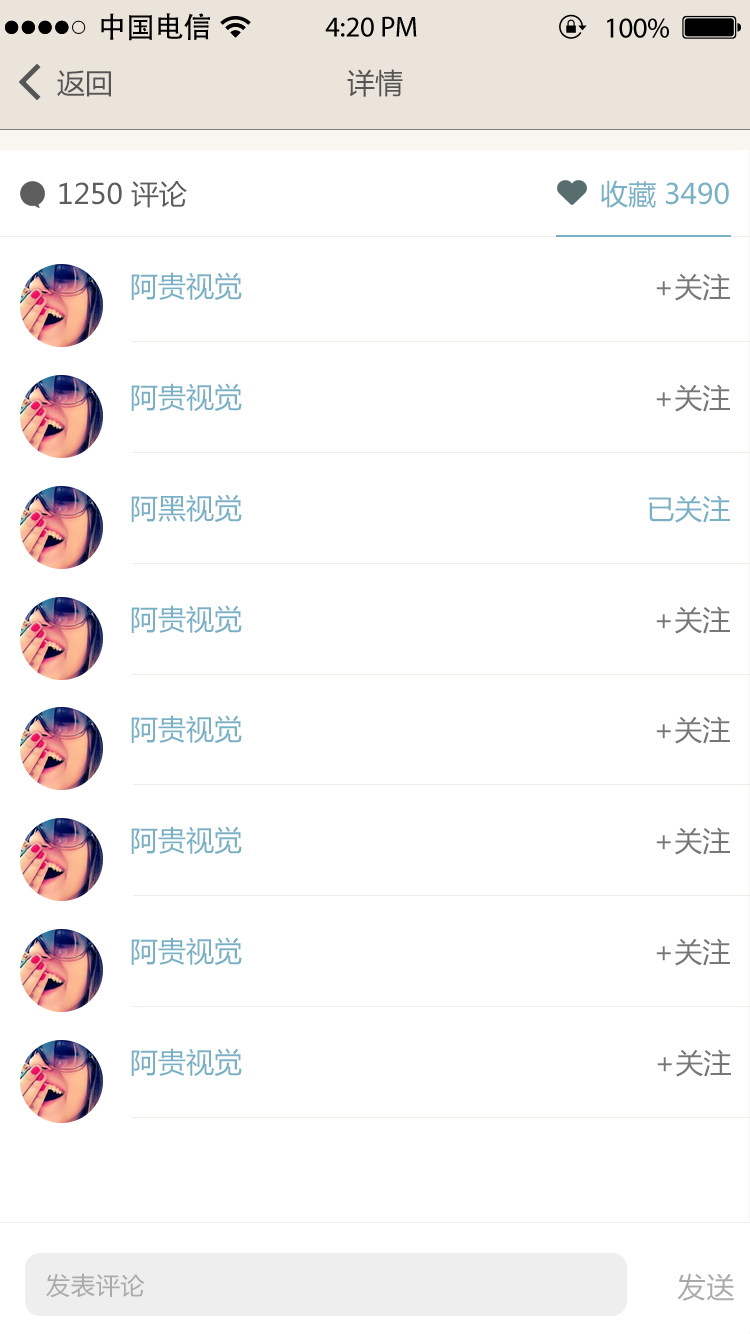
<style>
.page{position:relative;width:750px;height:1334px;background:#ffffff}
.page>*{position:absolute;margin:0}
.t1{font:28.8px "AdobeHeitiStd-Regular";color:#000000}
.t2{font:28.8px "MyriadPro-Regular";color:#000000}
.t3{font:28px "MicrosoftYaHei";color:#555555}
.t4{font:28px "MicrosoftYaHei";color:#5d5d5d}
.t5{font:28px "MicrosoftYaHei";color:#78b0c5}
.t6{font:28px "MicrosoftYaHei";color:#777777}
.t7{font:24px "MicrosoftYaHei";letter-spacing:0.036em;color:#aaaaaa}
.t8{font:28px "MicrosoftYaHei";letter-spacing:0.036em;color:#aaaaaa}
</style>
<div class="page">
<p class="t1" style="left:101px;top:13px;width:109px;height:28px">中国电信</p>
<p class="t2" style="left:325px;top:16px;width:92px;height:21px">4:20 PM</p>
<p class="t2" style="left:607px;top:18px;width:62px;height:20px">100%</p>
<p class="t3" style="left:57px;top:70px;width:54px;height:27px">返回</p>
<p class="t3" style="left:347px;top:69px;width:56px;height:28px">详情</p>
<p class="t4" style="left:59px;top:181px;width:128px;height:27px">1250 评论</p>
<p class="t5" style="left:601px;top:180px;width:128px;height:28px">收藏 3490</p>
<p class="t5" style="left:131px;top:272px;width:111px;height:28px">阿贵视觉</p>
<p class="t6" style="left:656px;top:273px;width:74px;height:28px">+关注</p>
<p class="t5" style="left:131px;top:383px;width:111px;height:28px">阿贵视觉</p>
<p class="t6" style="left:656px;top:384px;width:74px;height:28px">+关注</p>
<p class="t5" style="left:131px;top:494px;width:111px;height:28px">阿黑视觉</p>
<p class="t5" style="left:648px;top:495px;width:82px;height:28px">已关注</p>
<p class="t5" style="left:131px;top:605px;width:111px;height:28px">阿贵视觉</p>
<p class="t6" style="left:656px;top:606px;width:74px;height:28px">+关注</p>
<p class="t5" style="left:131px;top:715px;width:111px;height:28px">阿贵视觉</p>
<p class="t6" style="left:656px;top:716px;width:74px;height:28px">+关注</p>
<p class="t5" style="left:131px;top:826px;width:111px;height:28px">阿贵视觉</p>
<p class="t6" style="left:656px;top:827px;width:74px;height:28px">+关注</p>
<p class="t5" style="left:131px;top:937px;width:111px;height:28px">阿贵视觉</p>
<p class="t6" style="left:656px;top:938px;width:74px;height:28px">+关注</p>
<p class="t5" style="left:131px;top:1048px;width:111px;height:28px">阿贵视觉</p>
<p class="t6" style="left:657px;top:1049px;width:74px;height:28px">+关注</p>
<p class="t7" style="left:46px;top:1273px;width:99px;height:25px">发表评论</p>
<p class="t8" style="left:677px;top:1273px;width:57px;height:28px">发送</p>
</div>
